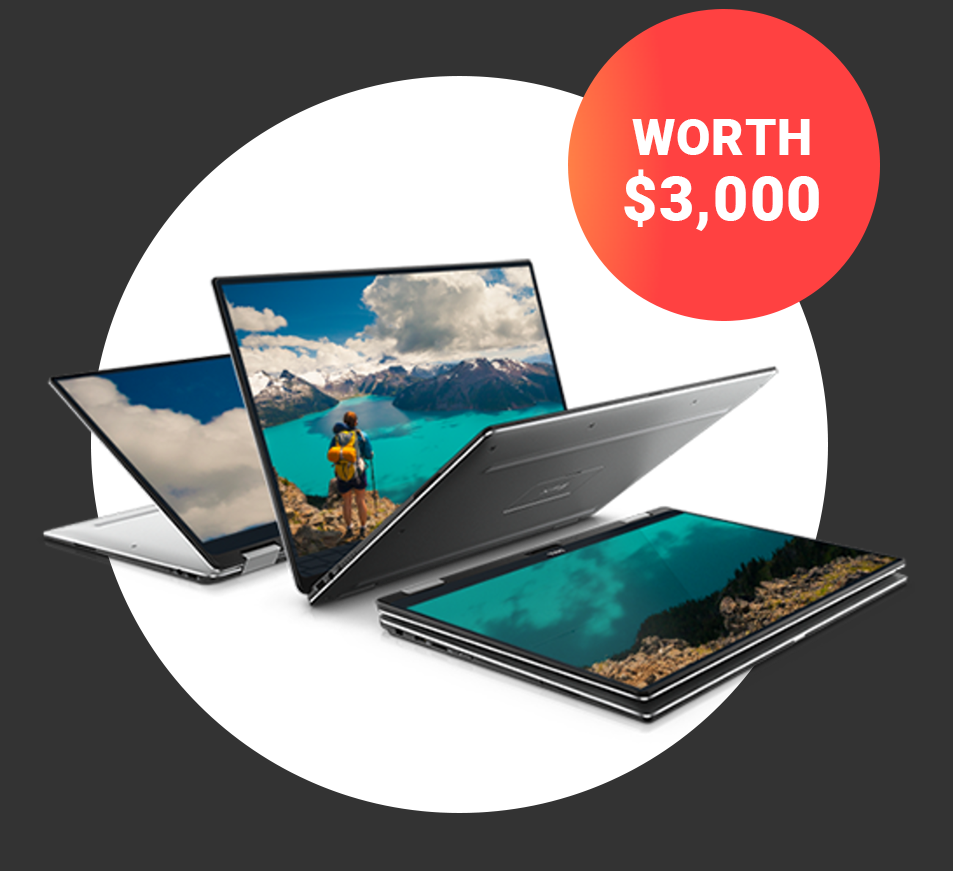
<style>
.page{position:relative;width:953px;height:871px;background:#333333}
.page>*{position:absolute;margin:0}
.t1{font:61.1px/65px "Roboto-Black";letter-spacing:0.02em;color:#ffffff}
.t2{font:49.5px/65px "Roboto-Black";letter-spacing:0.02em;color:#ffffff}
</style>
<div class="page">
<p class="t1" style="left:624px;top:119px;width:195px;height:112px;text-align:center"><span class="t2">WORTH<br></span>$3,000</p>
</div>
